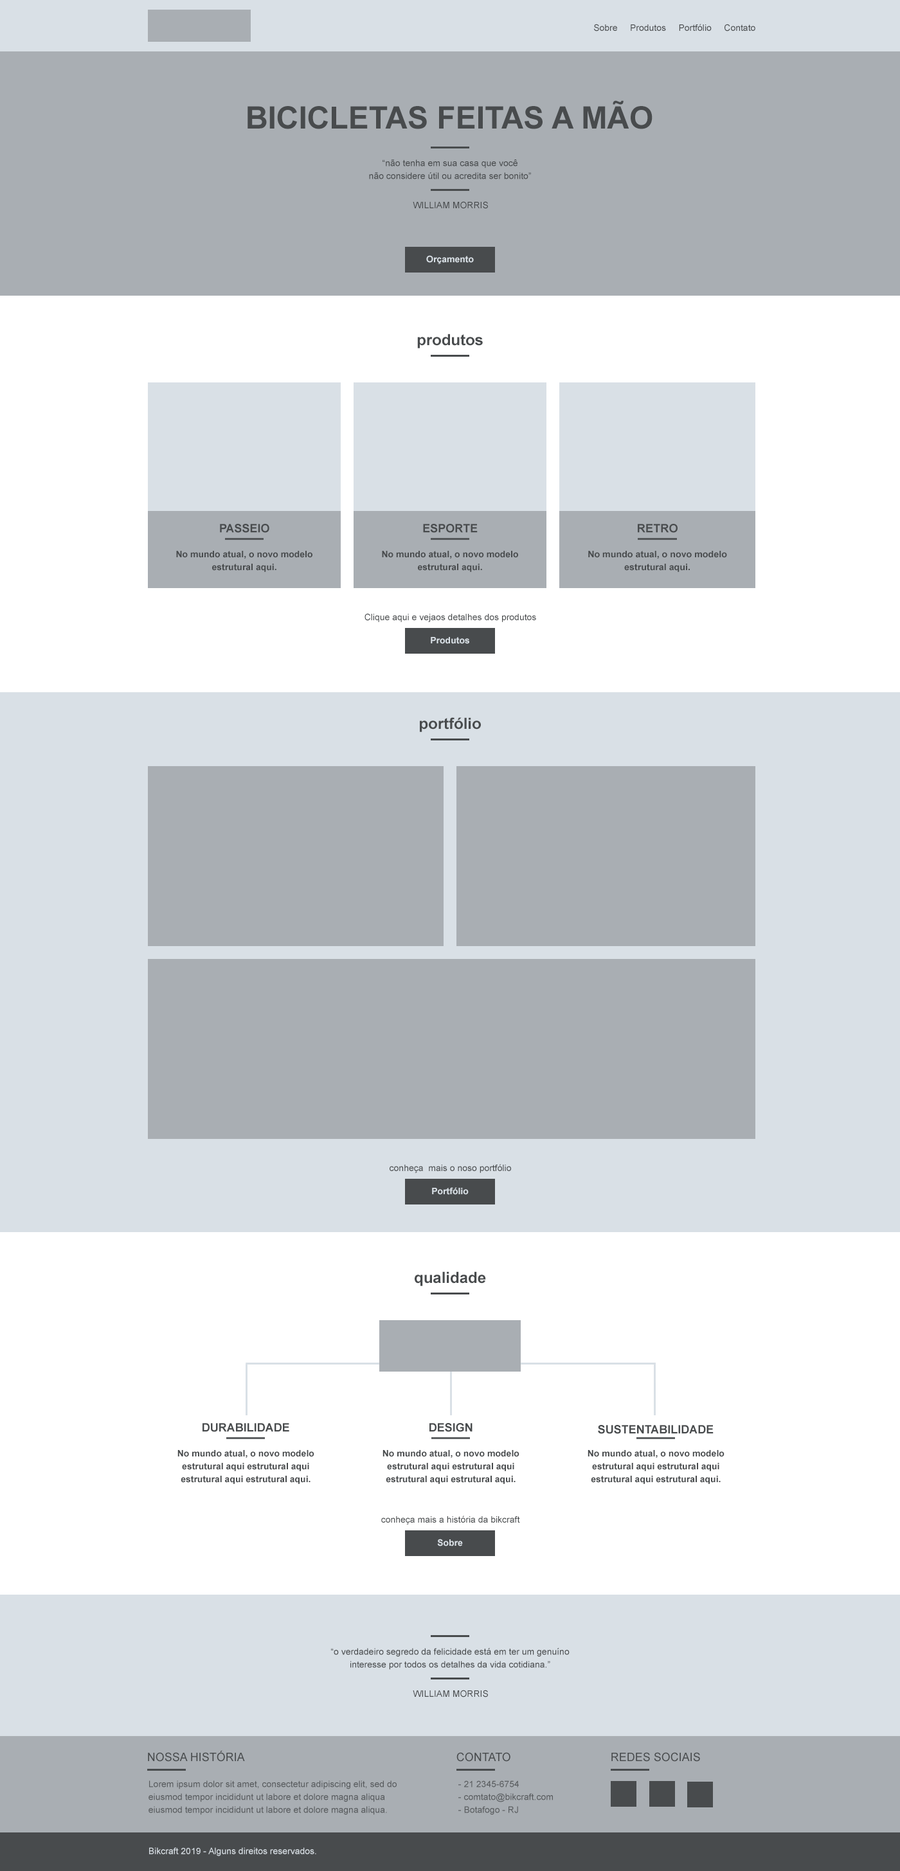
<style>
.page{position:relative;width:900px;height:1871px;background:#ffffff}
.page>*{position:absolute;margin:0}
.t1{font:9px "ArialMT";color:#484b4d}
.t2{font:30.9px "Arial-BoldMT";color:#484b4d;text-transform:uppercase}
.t3{font:9px/12.9px "ArialMT";color:#484b4d}
.t4{font:9px "Arial-BoldMT";color:#d9e0e6}
.t5{font:15.4px "Arial-BoldMT";color:#484b4d}
.t6{font:11.6px "Arial-BoldMT";color:#484b4d}
.t7{font:9px/12.9px "Arial-BoldMT";color:#484b4d}
.t8{font:11.6px "ArialMT";color:#484b4d;text-transform:uppercase}
.t9{font:9px "ArialMT";color:#d9e0e6}
</style>
<div class="page">
<p class="t1" style="left:594px;top:24px;width:161px;height:8px">Sobre     Produtos     Portfólio     Contato</p>
<p class="t2" style="left:248px;top:100px;width:404px;height:29px">Bicicletas Feitas a Mão</p>
<p class="t3" style="left:369px;top:159px;width:162px;height:20px;text-align:center">“não tenha em sua casa que você<br>não considere útil ou acredita ser bonito”</p>
<p class="t1" style="left:413px;top:201px;width:75px;height:8px">WILLIAM MORRIS</p>
<p class="t4" style="left:426px;top:255px;width:48px;height:9px">Orçamento</p>
<p class="t5" style="left:417px;top:334px;width:66px;height:14px">produtos</p>
<p class="t6" style="left:220px;top:524px;width:49px;height:9px">PASSEIO</p>
<p class="t6" style="left:423px;top:524px;width:55px;height:9px">ESPORTE</p>
<p class="t6" style="left:638px;top:524px;width:40px;height:9px">RETRO</p>
<p class="t7" style="left:176px;top:551px;width:136px;height:21px;text-align:center">No mundo atual, o novo modelo estrutural aqui.</p>
<p class="t7" style="left:382px;top:551px;width:136px;height:21px;text-align:center">No mundo atual, o novo modelo estrutural aqui.</p>
<p class="t7" style="left:588px;top:551px;width:139px;height:21px;text-align:center">No mundo atual, o novo modelo estrutural aqui.</p>
<p class="t1" style="left:364px;top:613px;width:172px;height:9px">Clique aqui e vejaos detalhes dos produtos</p>
<p class="t4" style="left:431px;top:637px;width:38px;height:7px">Produtos</p>
<p class="t5" style="left:420px;top:717px;width:61px;height:15px">portfólio</p>
<p class="t1" style="left:390px;top:1164px;width:121px;height:9px">conheça  mais o noso portfólio</p>
<p class="t4" style="left:432px;top:1187px;width:37px;height:8px">Portfólio</p>
<p class="t5" style="left:415px;top:1272px;width:71px;height:14px">qualidade</p>
<p class="t6" style="left:203px;top:1423px;width:86px;height:9px">DURABILIDADE</p>
<p class="t6" style="left:429px;top:1423px;width:44px;height:9px">DESIGN</p>
<p class="t6" style="left:598px;top:1425px;width:116px;height:9px">SUSTENTABILIDADE</p>
<p class="t7" style="left:177px;top:1450px;width:137px;height:34px;text-align:center">No mundo atual, o novo modelo estrutural aqui estrutural aqui<br>estrutural aqui estrutural aqui.</p>
<p class="t7" style="left:382px;top:1450px;width:137px;height:34px;text-align:center">No mundo atual, o novo modelo estrutural aqui estrutural aqui<br>estrutural aqui estrutural aqui.</p>
<p class="t7" style="left:588px;top:1450px;width:136px;height:34px;text-align:center">No mundo atual, o novo modelo estrutural aqui estrutural aqui<br>estrutural aqui estrutural aqui.</p>
<p class="t1" style="left:381px;top:1516px;width:139px;height:9px">conheça mais a história da bikcraft</p>
<p class="t4" style="left:437px;top:1539px;width:26px;height:8px">Sobre</p>
<p class="t3" style="left:331px;top:1648px;width:239px;height:22px;text-align:center">“o verdadeiro segredo da felicidade está em ter um genuíno<br>interesse por todos os detalhes da vida cotidiana.”</p>
<p class="t1" style="left:413px;top:1690px;width:75px;height:8px">WILLIAM MORRIS</p>
<p class="t8" style="left:148px;top:1751px;width:97px;height:11px">Nossa História</p>
<p class="t8" style="left:456px;top:1752px;width:54px;height:10px">CONTATO</p>
<p class="t8" style="left:611px;top:1752px;width:89px;height:10px">REDES SOCIAIS</p>
<p class="t3" style="left:148px;top:1781px;width:249px;height:34px;opacity:0.88">Lorem ipsum dolor sit amet, consectetur adipiscing elit, sed do eiusmod tempor incididunt ut labore et dolore magna aliqua<br>eiusmod tempor incididunt ut labore et dolore magna aliqua.</p>
<p class="t3" style="left:458px;top:1781px;width:95px;height:34px;opacity:0.88">- 21 2345-6754<br>- comtato@bikcraft.com<br>- Botafogo - RJ</p>
<p class="t9" style="left:149px;top:1848px;width:167px;height:9px">Bikcraft 2019 - Alguns direitos reservados.</p>
</div>
